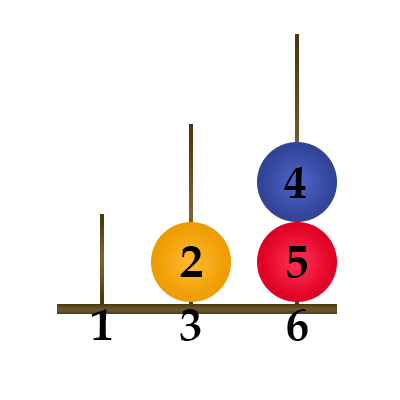
<style>
.page{position:relative;width:400px;height:400px;background:#ffffff}
.page>*{position:absolute;margin:0}
.t1{font:45.8px "BookAntiqua-Bold";color:#010101}
</style>
<div class="page">
<p class="t1" style="left:284px;top:167px;width:22px;height:31px">4</p>
<p class="t1" style="left:180px;top:246px;width:23px;height:31px">2</p>
<p class="t1" style="left:286px;top:246px;width:21px;height:32px">5</p>
<p class="t1" style="left:91px;top:309px;width:21px;height:31px">1</p>
<p class="t1" style="left:180px;top:309px;width:21px;height:32px">3</p>
<p class="t1" style="left:287px;top:309px;width:21px;height:32px">6</p>
</div>
